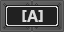
<style>
.page{position:relative;width:64px;height:32px;background:#212121}
.page>*{position:absolute;margin:0}
.t1{font:12px "Helvetica-Bold";color:#dadada}
</style>
<div class="page">
<p class="t1" style="left:22px;top:10px;width:21px;height:12px">[A]</p>
</div>
